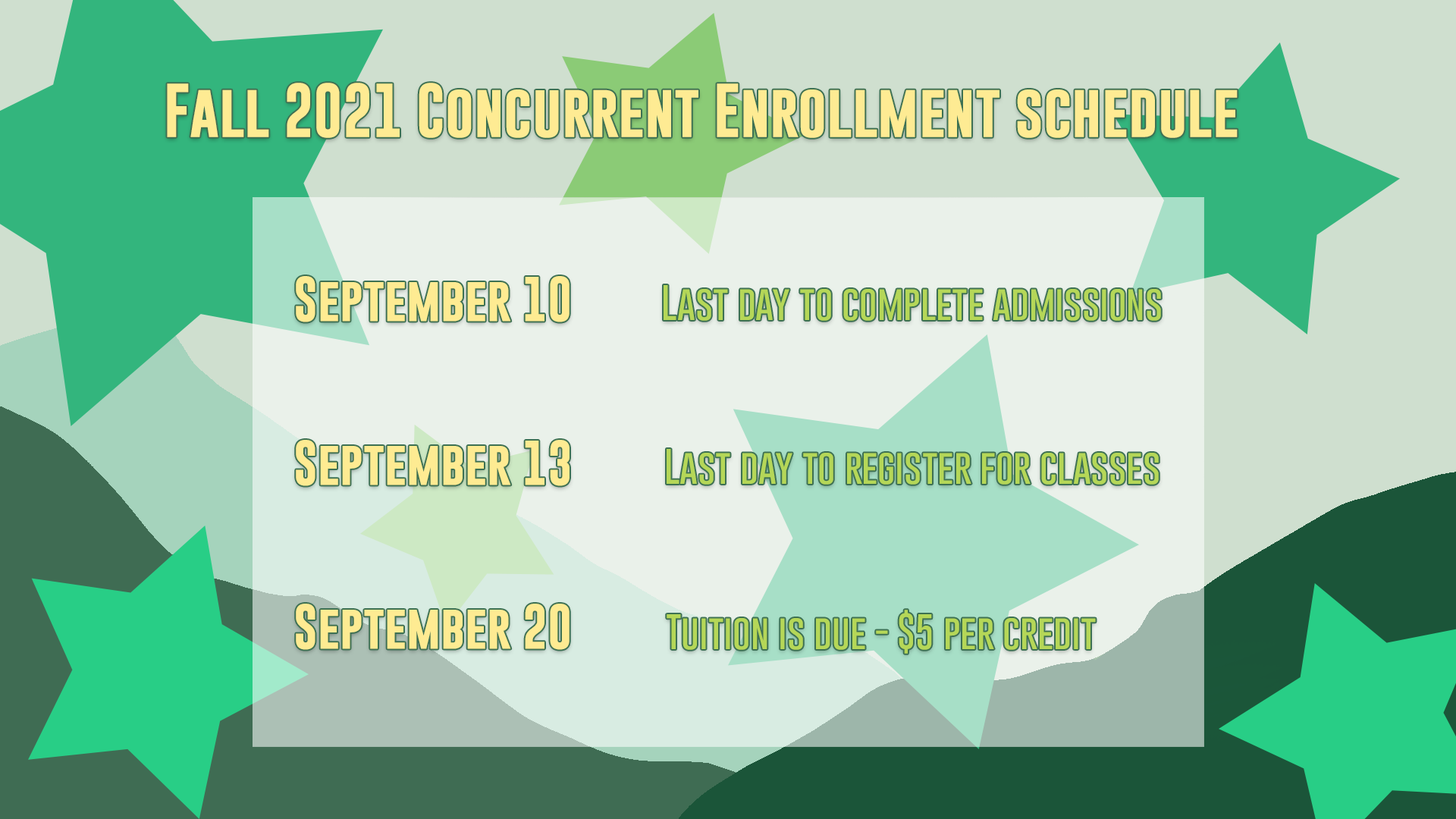
<style>
.page{position:relative;width:1456px;height:819px}
.page>*{position:absolute;margin:0}
.t1{font:54.6px "GoboldBold";color:#feeb93}
.t2{font:45.5px "GoboldBold";color:#feeb92}
.t3{font:36.4px "GoboldThin";color:#b5d758}
</style>
<div class="page">
<p class="t1" style="left:167px;top:83px;width:1071px;height:55px">Fall 2021 Concurrent Enrollment schedule</p>
<p class="t2" style="left:296px;top:276px;width:274px;height:374px">September 10<br><br><br>September 13<br><br><br>September 20</p>
<p class="t3" style="left:664px;top:285px;width:497px;height:36px">Last day to complete admissions</p>
<p class="t3" style="left:667px;top:449px;width:492px;height:36px">Last day to register for classes</p>
<p class="t3" style="left:667px;top:610px;width:429px;height:44px">Tuition is due - $5 per credit</p>
</div>
